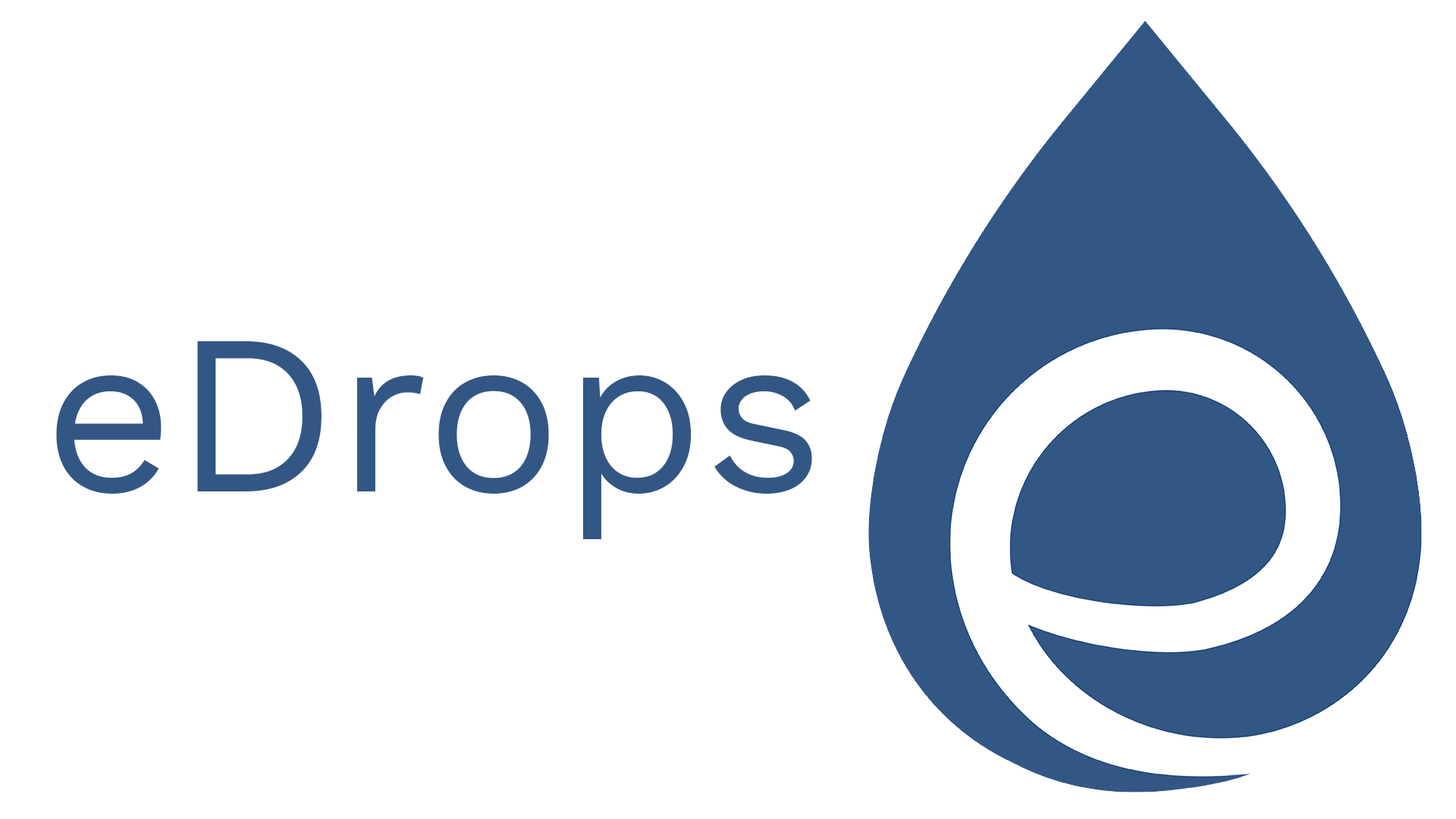
<style>
.page{position:relative;width:1456px;height:819px;background:#ffffff}
.page>*{position:absolute;margin:0}
.t1{font:227.5px "WorkSans-Regular";color:#325785}
</style>
<div class="page">
<p class="t1" style="left:56px;top:341px;width:756px;height:198px">eDrops</p>
</div>
